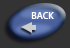
<style>
.page{position:relative;width:70px;height:48px;background:#333333}
.page>*{position:absolute;margin:0}
.t1{font:9px "SegoeUI-SemiBold";color:#ffffff}
</style>
<div class="page">
<p class="t1" style="left:31px;top:12px;width:23px;height:7px">BACK</p>
</div>
